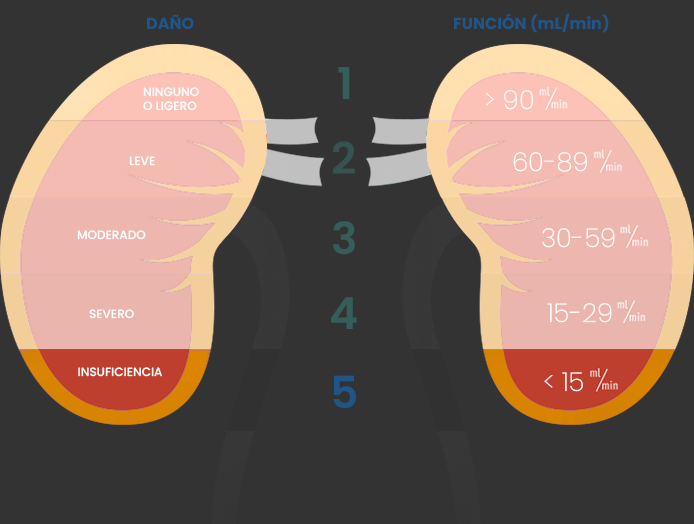
<style>
.page{position:relative;width:694px;height:524px;background:#333333}
.page>*{position:absolute;margin:0}
.t1{font:16px "Poppins-Bold";color:#215587}
.t2{font:44px "Poppins-SemiBold";color:#355e5b}
.t3{font:12px "Poppins-Medium";color:#ffffff}
.t4{font:26px "Poppins-ExtraLight";color:#ffffff}
.t5{font:44px "Poppins-SemiBold";color:#345351}
.t6{font:44px "Poppins-SemiBold";color:#215587}
</style>
<div class="page">
<p class="t1" style="left:147px;top:14px;width:47px;height:15px">DAÑO</p>
<p class="t1" style="left:454px;top:13px;width:155px;height:20px">FUNCIÓN (mL/min)</p>
<p class="t2" style="left:338px;top:67px;width:12px;height:32px">1</p>
<p class="t3" style="left:143px;top:87px;width:56px;height:24px">NINGUNO <br>O LIGERO</p>
<p class="t4" style="left:485px;top:90px;width:49px;height:20px">&gt; 90</p>
<p class="t5" style="left:333px;top:141px;width:22px;height:33px">2</p>
<p class="t3" style="left:129px;top:156px;width:26px;height:10px">LEVE</p>
<p class="t4" style="left:513px;top:152px;width:74px;height:20px">60-89</p>
<p class="t2" style="left:333px;top:221px;width:22px;height:34px">3</p>
<p class="t3" style="left:77px;top:230px;width:69px;height:10px">MODERADO</p>
<p class="t4" style="left:542px;top:228px;width:73px;height:20px">30-59</p>
<p class="t2" style="left:331px;top:297px;width:26px;height:32px">4</p>
<p class="t4" style="left:547px;top:303px;width:65px;height:20px">15-29</p>
<p class="t3" style="left:89px;top:309px;width:45px;height:10px">SEVERO</p>
<p class="t3" style="left:78px;top:367px;width:84px;height:10px">INSUFICIENCIA</p>
<p class="t6" style="left:333px;top:375px;width:23px;height:33px">5</p>
<p class="t4" style="left:544px;top:372px;width:39px;height:20px">&lt; 15</p>
</div>
